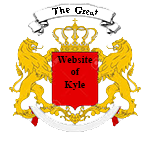
<style>
.page{position:relative;width:150px;height:150px;background:#ffffff}
.page>*{position:absolute;margin:0}
.t1{font:10.4px "TimesNewRomanPS-BoldMT";color:#000000}
</style>
<div class="page">
<p class="t1" style="left:57px;top:56px;width:36px;height:34px;text-align:center">Website of<br>Kyle</p>
</div>
